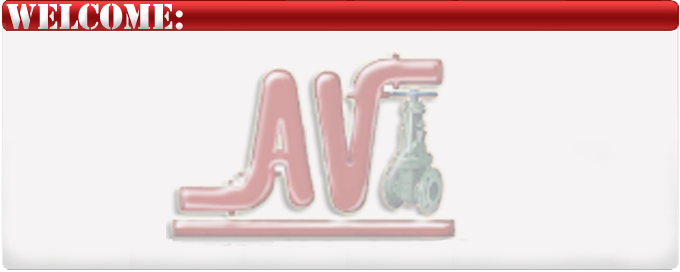
<style>
.page{position:relative;width:680px;height:272px;background:#f5f3f4}
.page>*{position:absolute;margin:0}
.t1{font:37.5px "Stencil";letter-spacing:-0.01em;color:#fffdfd}
</style>
<div class="page">
<p class="t1" style="left:6px;top:3px;width:177px;height:27px">welcome:</p>
</div>
